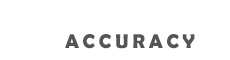
<style>
.page{position:relative;width:230px;height:60px;background:#ffffff}
.page>*{position:absolute;margin:0}
.t1{font:20px "BerlinSansFBDemi-Bold";letter-spacing:0.2em;color:#555555}
</style>
<div class="page">
<p class="t1" style="left:65px;top:34px;width:130px;height:15px">ACCURACY</p>
</div>
